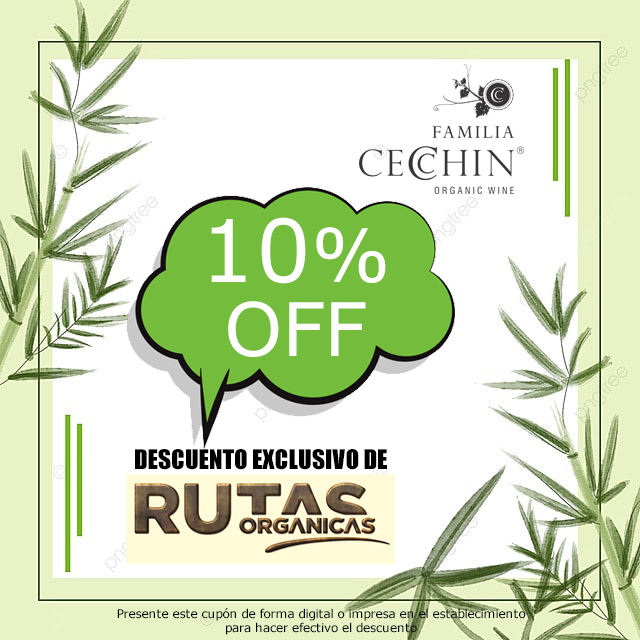
<style>
.page{position:relative;width:640px;height:640px;background:#ffffff}
.page>*{position:absolute;margin:0}
.t1{font:73.9px/73.9px "MSReferenceSansSerif";color:#ffffff}
.t2{font:86.4px/73.9px "MSReferenceSansSerif";color:#ffffff}
.t3{font:25.1px "Impact";color:#000000}
.t4{font:12px "MSReferenceSansSerif";color:#000000}
</style>
<div class="page">
<p class="t1" style="left:211px;top:217px;width:175px;height:140px;text-align:center"><span class="t2">10</span>%<br>OFF</p>
<p class="t3" style="left:135px;top:449px;width:252px;height:21px">DESCUENTO EXCLUSIVO DE</p>
<p class="t4" style="left:117px;top:608px;width:409px;height:27px;text-align:center">Presente este cupón de forma digital o impresa en el establecimiento<br>para hacer efectivo el descuento</p>
</div>
